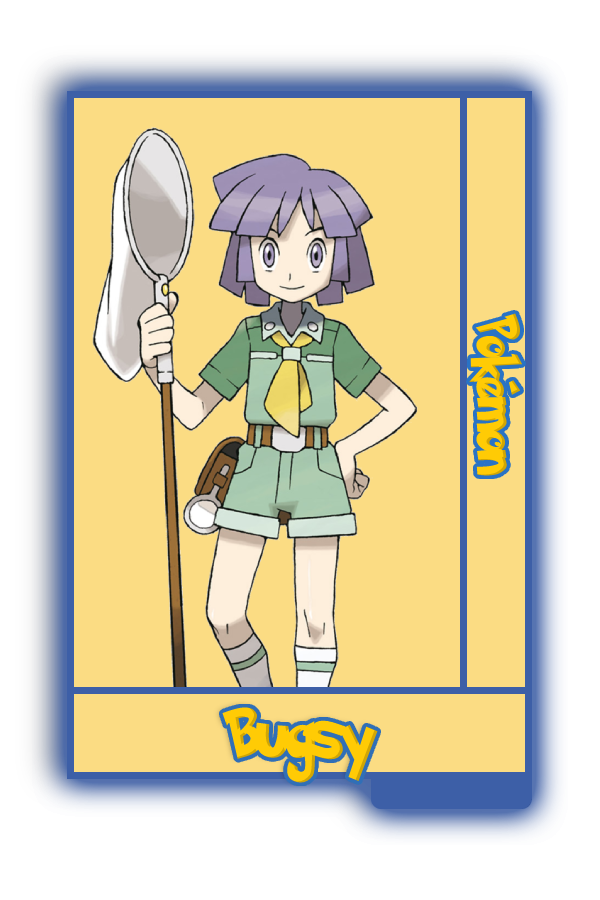
<style>
.page{position:relative;width:600px;height:900px;background:#fbdc83}
.page>*{position:absolute;margin:0}
.t1{font:48.8px "PokemonSolidNormal";color:#ffcb05;scale:0.8 1}
.t2{font:56.6px "PokemonSolidNormal";color:#ffcb05;scale:0.92 1}
</style>
<div class="page">
<p class="t1" style="left:469px;top:313px;width:54px;height:163px;rotate:90deg">Pokémon</p>
<p class="t2" style="left:222px;top:707px;width:156px;height:76px">Bugsy</p>
</div>
